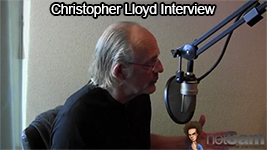
<style>
.page{position:relative;width:267px;height:150px}
.page>*{position:absolute;margin:0}
.t1{font:13.5px "ArialMT";color:#ffffff}
</style>
<div class="page">
<p class="t1" style="left:51px;top:3px;width:164px;height:14px">Christopher Lloyd Interview</p>
</div>
